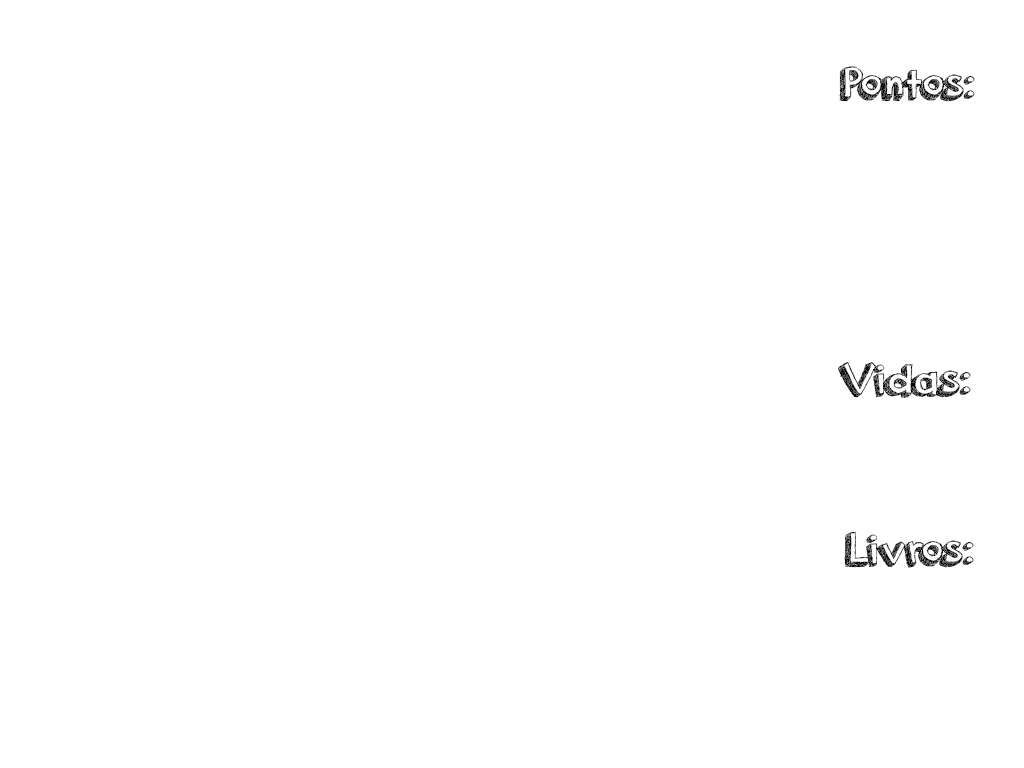
<style>
.page{position:relative;width:1024px;height:768px;background:#ffffff}
.page>*{position:absolute;margin:0}
.t1{font:48px "orangejuice";color:#000000}
</style>
<div class="page">
<p class="t1" style="left:839px;top:66px;width:136px;height:36px">Pontos:</p>
<p class="t1" style="left:838px;top:362px;width:133px;height:36px">Vidas:</p>
<p class="t1" style="left:844px;top:531px;width:130px;height:37px">Livros:</p>
</div>
